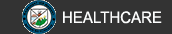
<style>
.page{position:relative;width:172px;height:34px;background:#333333}
.page>*{position:absolute;margin:0}
.t1{font:16px "ArialMT";color:#fdfefe;scale:0.94 1}
</style>
<div class="page">
<p class="t1" style="left:63px;top:11px;width:99px;height:13px">HEALTHCARE</p>
</div>
